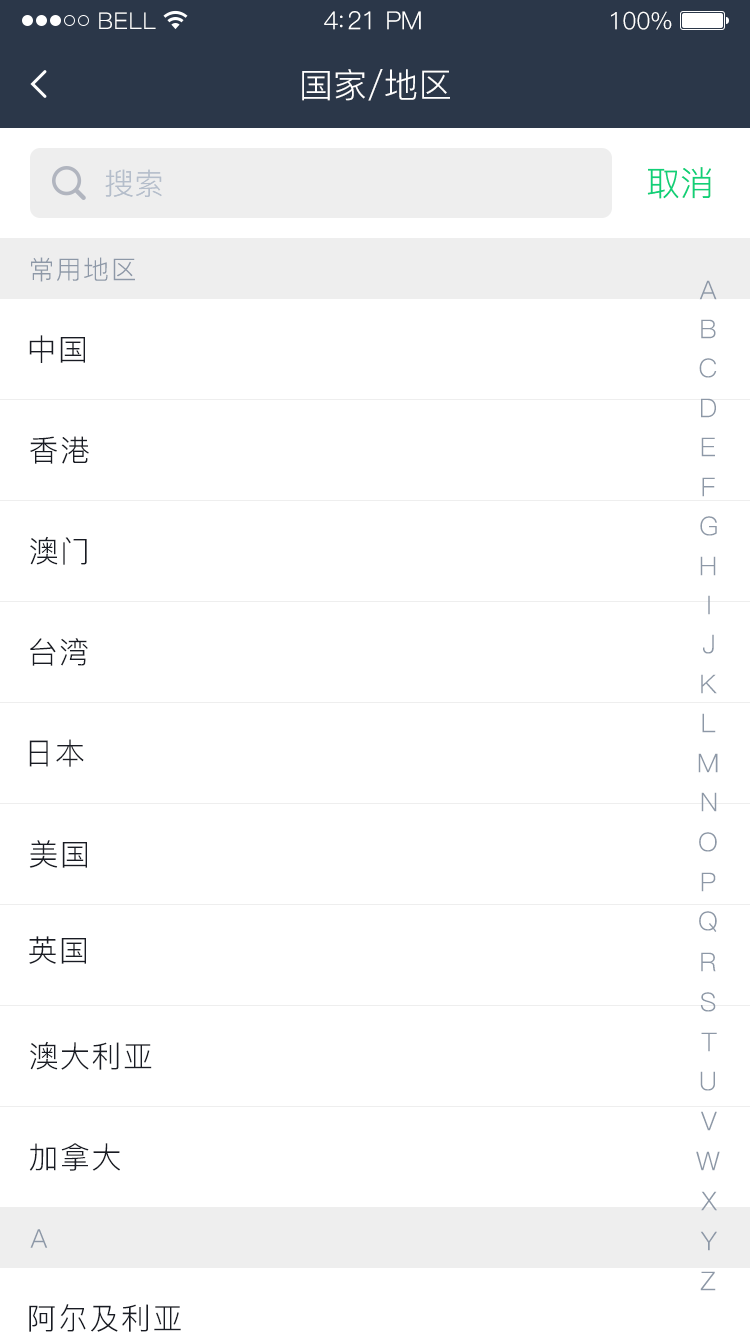
<style>
.page{position:relative;width:750px;height:1334px;background:#ffffff}
.page>*{position:absolute;margin:0}
.t1{font:23px "PingFang-SC-Regular";letter-spacing:0.02em;color:#ffffff}
.t2{font:25px "PingFang-SC-Regular";letter-spacing:-0.02em;color:#ffffff}
.t3{font:24px "PingFang-SC-Regular";letter-spacing:-0.02em;color:#ffffff}
.t4{font:34px "PingFang-SC-Regular";color:#ffffff}
.t5{font:30px "PingFang-SC-Regular";color:#b5becb}
.t6{font:34px "PingFang-SC-Regular";color:#10d078}
.t7{font:26px "PingFang-SC-Regular";letter-spacing:0.05em;color:#8d98a7}
.t8{font:30px "PingFang-SC-Regular";letter-spacing:0.05em;color:#181b23}
.t9{font:26px "PingFang-SC-Regular";letter-spacing:0.05em}
</style>
<div class="page">
<p class="t1" style="left:99px;top:12px;width:57px;height:17px">BELL</p>
<p class="t2" style="left:324px;top:11px;width:97px;height:19px">4:21 PM</p>
<p class="t3" style="left:611px;top:11px;width:61px;height:19px">100%</p>
<p class="t4" style="left:302px;top:69px;width:148px;height:32px">国家/地区</p>
<p class="t5" style="left:105px;top:169px;width:57px;height:28px">搜索</p>
<p class="t6" style="left:647px;top:167px;width:64px;height:32px">取消</p>
<p class="t7" style="left:31px;top:257px;width:104px;height:25px">常用地区</p>
<p class="t7" style="left:699px;top:280px;width:18px;height:20px">A</p>
<p class="t7" style="left:701px;top:319px;width:15px;height:20px">B</p>
<p class="t8" style="left:29px;top:335px;width:56px;height:28px">中国</p>
<p class="t7" style="left:699px;top:358px;width:18px;height:20px">C</p>
<p class="t7" style="left:701px;top:398px;width:15px;height:20px">D</p>
<p class="t8" style="left:30px;top:436px;width:59px;height:28px">香港</p>
<p class="t7" style="left:701px;top:437px;width:14px;height:20px">E</p>
<p class="t7" style="left:702px;top:477px;width:13px;height:20px">F</p>
<p class="t7" style="left:700px;top:516px;width:17px;height:20px">G</p>
<p class="t8" style="left:30px;top:536px;width:57px;height:29px">澳门</p>
<p class="t7" style="left:700px;top:556px;width:16px;height:20px">H</p>
<p class="t9" style="left:708px;top:595px;width:2px;height:20px">I</p>
<p class="t8" style="left:30px;top:638px;width:58px;height:28px">台湾</p>
<p class="t7" style="left:703px;top:634px;width:11px;height:20px">J</p>
<p class="t7" style="left:701px;top:674px;width:16px;height:20px">K</p>
<p class="t7" style="left:702px;top:713px;width:14px;height:20px">L</p>
<p class="t8" style="left:29px;top:739px;width:55px;height:28px">日本</p>
<p class="t7" style="left:698px;top:753px;width:20px;height:20px">M</p>
<p class="t7" style="left:701px;top:792px;width:16px;height:20px">N</p>
<p class="t7" style="left:699px;top:832px;width:18px;height:20px">O</p>
<p class="t8" style="left:29px;top:840px;width:58px;height:28px">美国</p>
<p class="t7" style="left:701px;top:872px;width:15px;height:20px">P</p>
<p class="t7" style="left:699px;top:911px;width:18px;height:21px">Q</p>
<p class="t8" style="left:29px;top:936px;width:57px;height:28px">英国</p>
<p class="t7" style="left:701px;top:952px;width:15px;height:20px">R</p>
<p class="t7" style="left:700px;top:992px;width:16px;height:20px">S</p>
<p class="t7" style="left:701px;top:1032px;width:16px;height:20px">T</p>
<p class="t8" style="left:30px;top:1041px;width:122px;height:29px">澳大利亚</p>
<p class="t7" style="left:700px;top:1071px;width:15px;height:20px">U</p>
<p class="t7" style="left:701px;top:1111px;width:16px;height:20px">V</p>
<p class="t8" style="left:29px;top:1143px;width:91px;height:28px">加拿大</p>
<p class="t7" style="left:696px;top:1151px;width:24px;height:20px">W</p>
<p class="t7" style="left:701px;top:1191px;width:16px;height:20px">X</p>
<p class="t7" style="left:30px;top:1229px;width:18px;height:19px">A</p>
<p class="t7" style="left:700px;top:1231px;width:17px;height:20px">Y</p>
<p class="t7" style="left:700px;top:1271px;width:16px;height:20px">Z</p>
<p class="t8" style="left:29px;top:1304px;width:152px;height:28px">阿尔及利亚</p>
</div>
